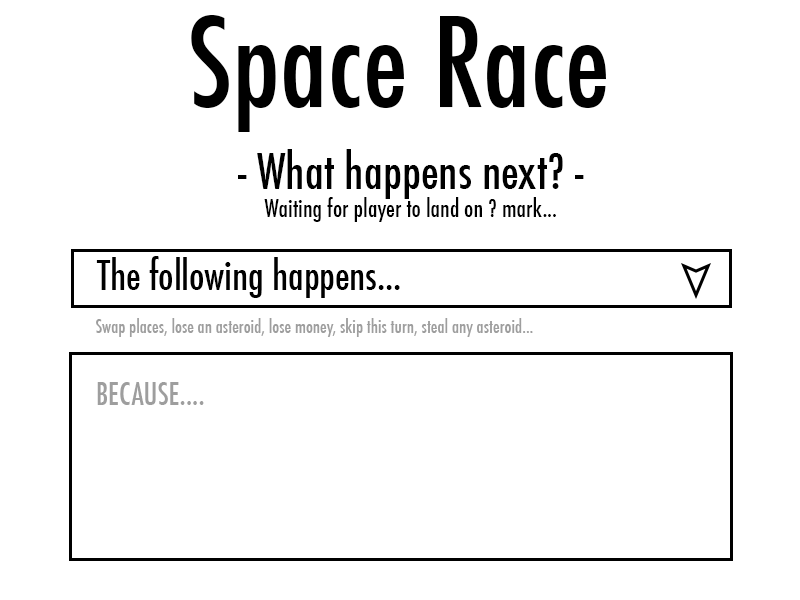
<style>
.page{position:relative;width:800px;height:600px;background:#ffffff}
.page>*{position:absolute;margin:0}
.t1{font:121.4px "Futura-CondensedMedium";color:#000000}
.t2{font:24px "Futura-CondensedMedium";color:#000000}
.t3{font:48px "Futura-CondensedMedium";color:#000000}
.t4{font:39.6px "Futura-CondensedMedium";color:#000000}
.t5{font:18px "Futura-CondensedMedium";color:#9e9e9e}
.t6{font:30px "Futura-CondensedMedium";color:#9e9e9e}
</style>
<div class="page">
<p class="t1" style="left:191px;top:15px;width:415px;height:117px">Space Race</p>
<p class="t2" style="left:238px;top:149px;width:346px;height:73px;text-align:center"><span class="t3">- What happens next? -<br></span>Waiting for player to land on ? mark...</p>
<p class="t4" style="left:96px;top:256px;width:304px;height:42px">The following happens...</p>
<p class="t5" style="left:96px;top:318px;width:437px;height:19px">Swap places, lose an asteroid, lose money, skip this turn, steal any asteroid...</p>
<p class="t6" style="left:97px;top:382px;width:107px;height:23px">BECAUSE....</p>
</div>
